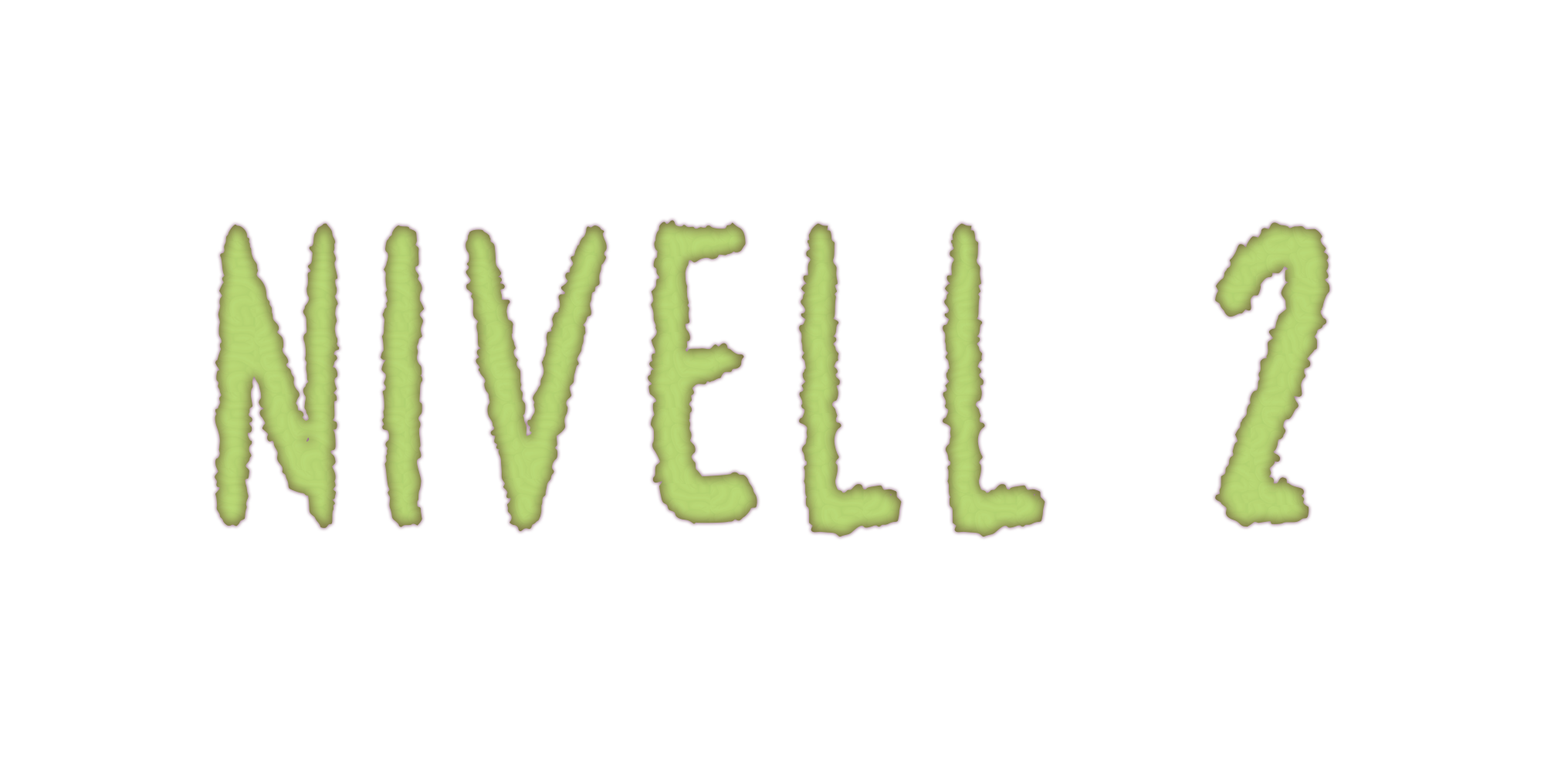
<style>
.page{position:relative;width:1544px;height:772px;background:#ffffff}
.page>*{position:absolute;margin:0}
.t1{font:321.7px "Metalien";letter-spacing:0.1em;color:#b7d974}
</style>
<div class="page">
<p class="t1" style="left:215px;top:220px;width:1115px;height:317px">Nivell 2</p>
</div>
